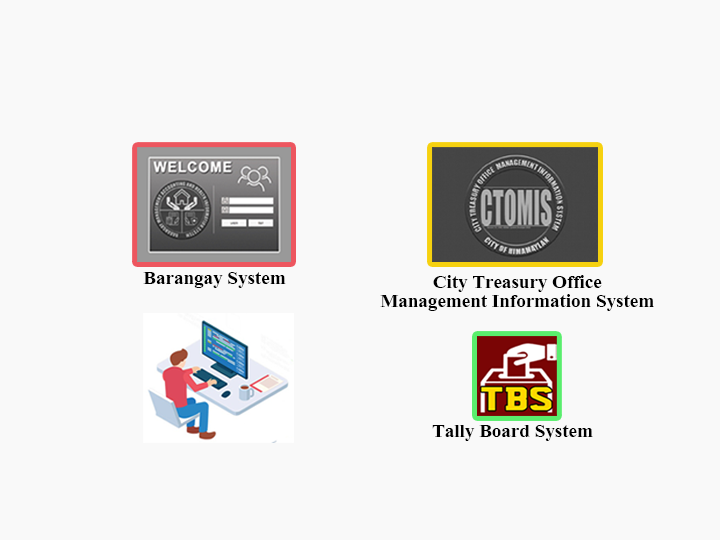
<style>
.page{position:relative;width:720px;height:540px;background:#f9f9f9}
.page>*{position:absolute;margin:0}
.t1{font:23.2px "Aparajita-Bold";color:#000000}
.t2{font:23.2px/19.3px "Aparajita-Bold";color:#000000}
</style>
<div class="page">
<p class="t1" style="left:143px;top:272px;width:143px;height:16px">Barangay System</p>
<p class="t2" style="left:380px;top:275px;width:274px;height:36px;text-align:center">City Treasury Office<br>Management Information System</p>
<p class="t1" style="left:432px;top:425px;width:161px;height:16px">Tally Board System</p>
</div>
